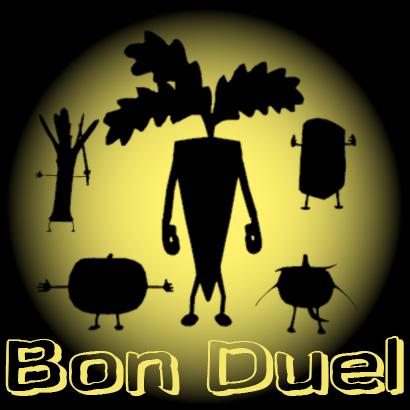
<style>
.page{position:relative;width:410px;height:410px;background:#000000}
.page>*{position:absolute;margin:0}
.t1{font:72px "Gazzarelli";color:#f5e76a}
</style>
<div class="page">
<p class="t1" style="left:5px;top:336px;width:399px;height:60px">Bon Duel</p>
</div>
